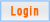
<style>
.page{position:relative;width:50px;height:22px}
.page>*{position:absolute;margin:0}
.t1{font:12px "Arial-BoldMT";letter-spacing:0.2em;color:#fd6604;font-weight:bold;scale:0.63 1}
</style>
<div class="page">
<p class="t1" style="left:11px;top:6px;width:28px;height:12px">Login</p>
</div>
